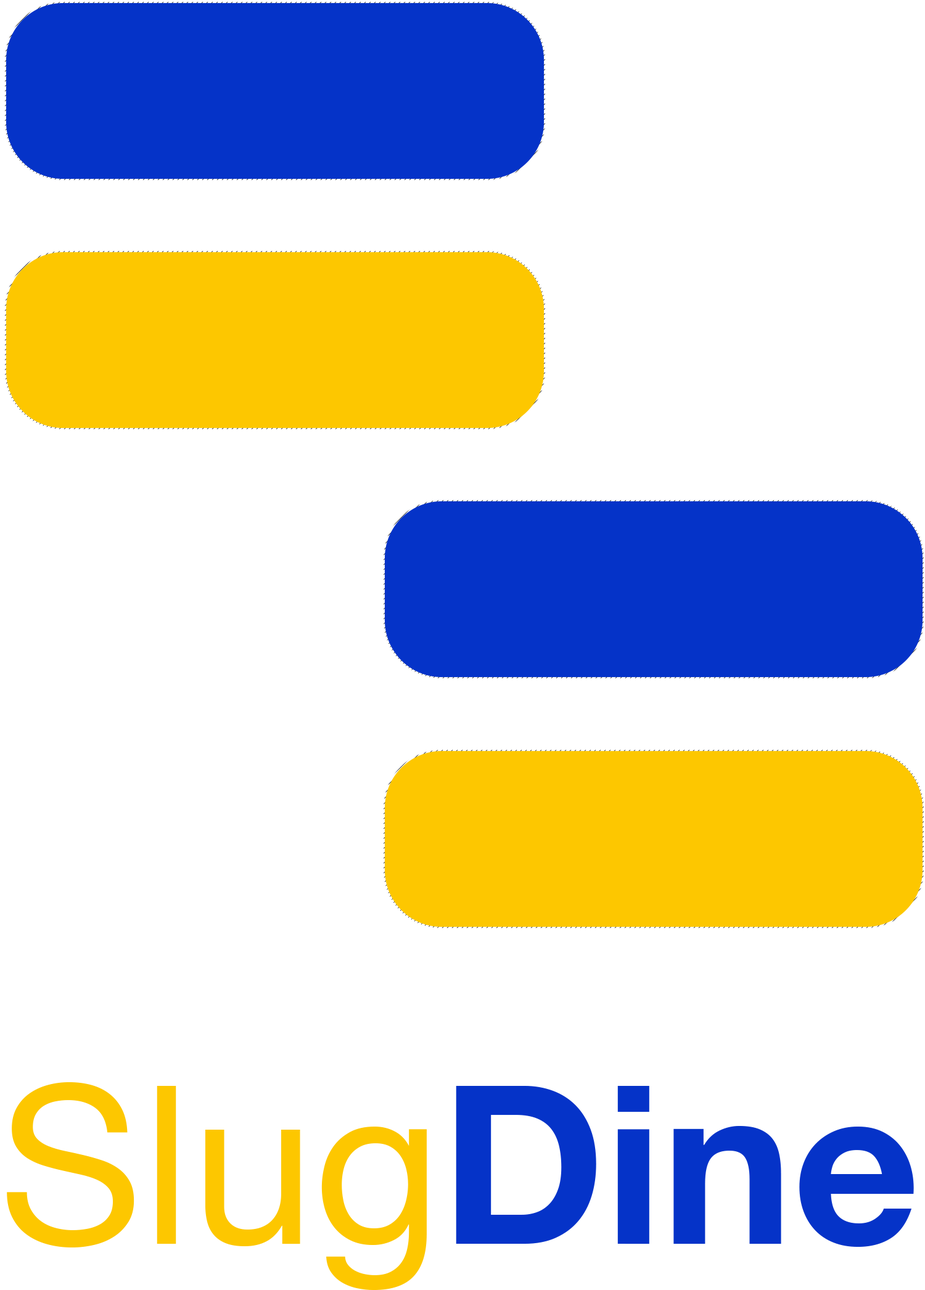
<style>
.page{position:relative;width:925px;height:1290px;background:#ffffff}
.page>*{position:absolute;margin:0}
.t1{font:221.1px "HelveticaNeue";color:#fdc700}
.t2{font:221.1px "HelveticaNeue-Bold";color:#0533c8}
</style>
<div class="page">
<p class="t1" style="left:7px;top:1082px;width:907px;height:208px">Slug<span class="t2">Dine</span></p>
</div>
